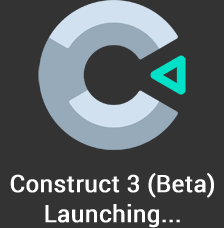
<style>
.page{position:relative;width:224px;height:228px;background:#333333}
.page>*{position:absolute;margin:0}
.t1{font:23.7px/29.6px "Roboto-Regular";color:#ffffff;font-weight:bold}
</style>
<div class="page">
<p class="t1" style="left:10px;top:173px;width:204px;height:55px;text-align:center">Construct 3 (Beta)<br>Launching...</p>
</div>
